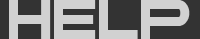
<style>
.page{position:relative;width:200px;height:39px;background:#333333}
.page>*{position:absolute;margin:0}
.t1{font:75px "Bitsumishi";color:#d1d1d1}
</style>
<div class="page">
<p class="t1" style="left:9px;top:0px;width:181px;height:39px">Help</p>
</div>
